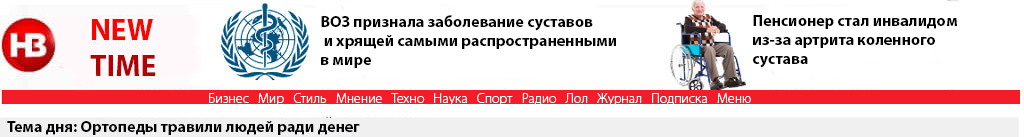
<style>
.page{position:relative;width:1024px;height:137px;background:#ffffff}
.page>*{position:absolute;margin:0}
.t1{font:16px "MyriadPro-Bold";color:#000000}
.t2{font:14px "MyriadPro-Light";color:#ffffff}
.t3{font:16px "MyriadPro-Bold";color:#000306}
</style>
<div class="page">
<p class="t1" style="left:321px;top:15px;width:295px;height:53px">ВОЗ признала заболевание суставов<br> и хрящей самыми распространенными <br>в мире</p>
<p class="t1" style="left:753px;top:15px;width:204px;height:53px">Пенсионер стал инвалидом <br>из-за артрита коленного <br>сустава</p>
<p class="t2" style="left:209px;top:93px;width:542px;height:13px">Бизнес   Мир   Стиль   Мнение   Техно   Наука   Спорт   Радио   Лол   Журнал   Подписка   Меню</p>
<p class="t3" style="left:7px;top:121px;width:353px;height:14px">Тема дня: Ортопеды травили людей ради денег</p>
</div>
